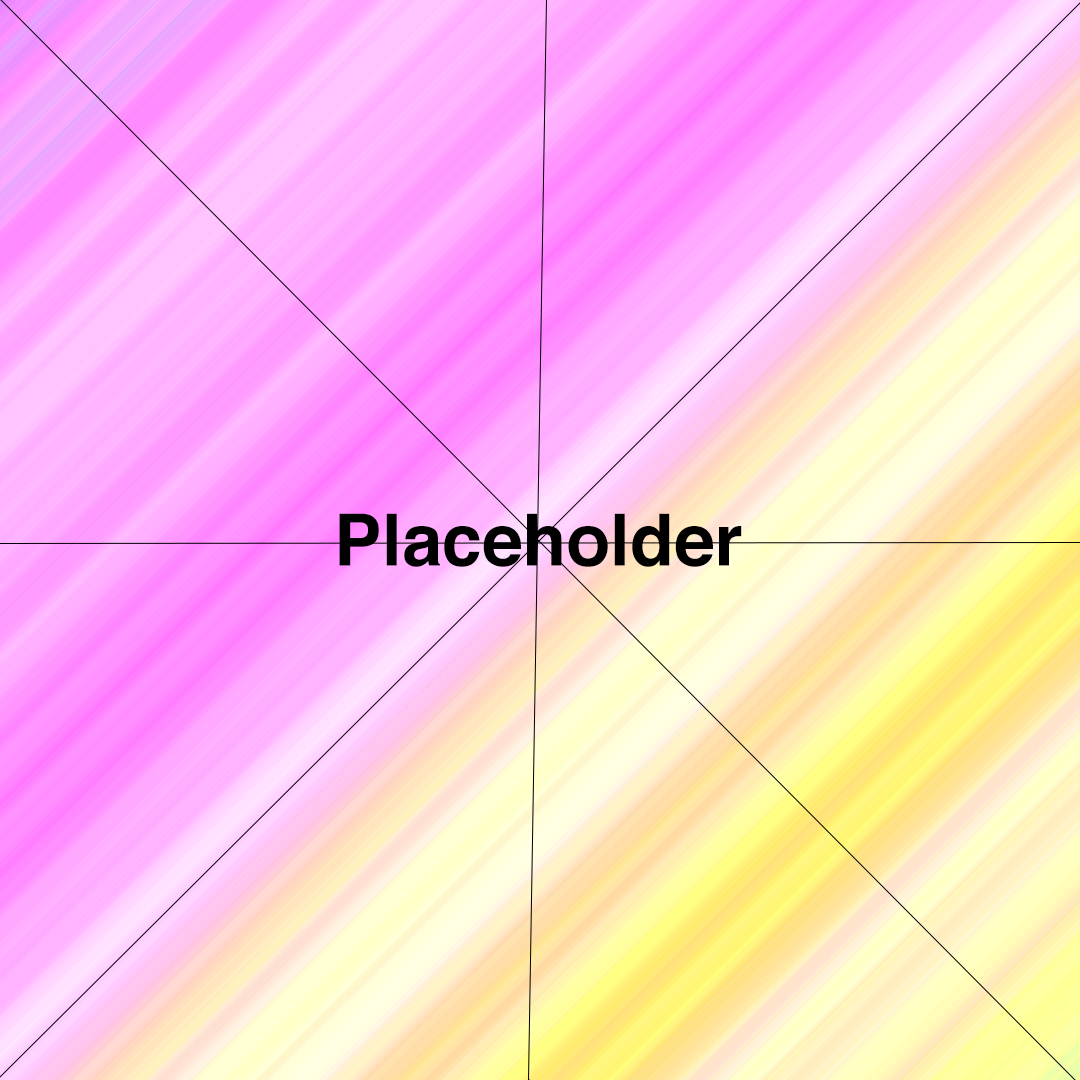
<style>
.page{position:relative;width:1080px;height:1080px}
.page>*{position:absolute;margin:0}
.t1{font:72px "Helvetica-Bold";color:#000000}
</style>
<div class="page">
<p class="t1" style="left:339px;top:513px;width:403px;height:54px">Placeholder</p>
</div>
